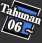
<style>
.page{position:relative;width:42px;height:43px;background:#333333}
.page>*{position:absolute;margin:0}
.t1{font:11px/14px "RyuminPro-ExBold";letter-spacing:-0.08em;color:#ffffff;font-weight:bold}
.t2{font:13px/14px "RyuminPro-ExBold";color:#ffffff;font-weight:bold}
.t3{font:13px/14px "WineArial";color:#ffffff;font-weight:bold}
</style>
<div class="page">
<p class="t1" style="left:0px;top:3px;width:41px;height:30px;text-align:center;rotate:19deg">Tahunan<br><span class="t2">  06 </span><span class="t3">~</span></p>
</div>
